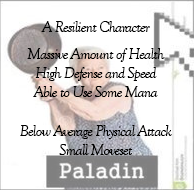
<style>
.page{position:relative;width:194px;height:190px;background:#ffffff}
.page>*{position:absolute;margin:0}
.t1{font:16px "GoudyOldStyleT-Italic";letter-spacing:-0.05em;color:#010101}
</style>
<div class="page">
<p class="t1" style="left:20px;top:21px;width:152px;height:134px;text-align:center">A Resilient Character<br><br>Massive Amount of Health<br>High Defense and Speed<br>Able to Use Some Mana<br><br>Below Average Physical Attack<br>Small Moveset</p>
</div>
